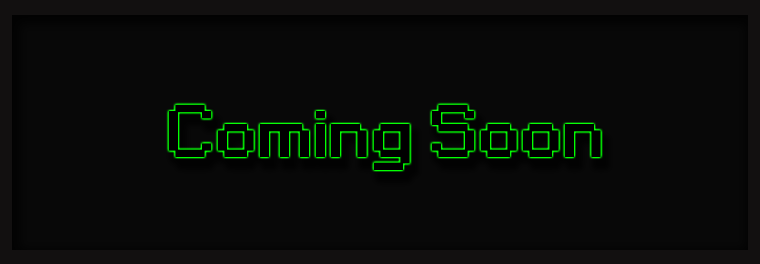
<style>
.page{position:relative;width:760px;height:264px;background:#080808}
.page>*{position:absolute;margin:0}
.t1{font:68.5px "Small Fonts";letter-spacing:0.025em;color:#000000;font-weight:bold;scale:1.25 1}
</style>
<div class="page">
<p class="t1" style="left:168px;top:104px;width:433px;height:66px">Coming Soon</p>
</div>
